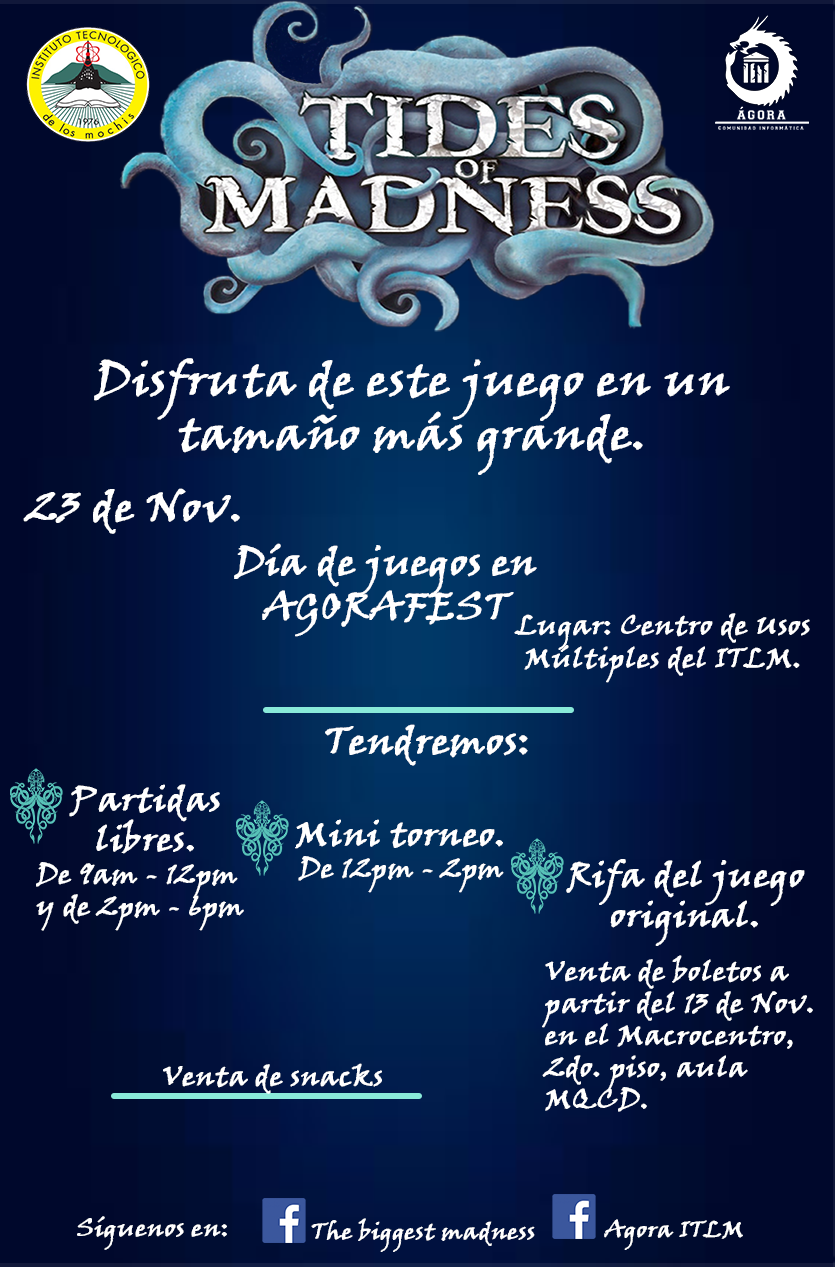
<style>
.page{position:relative;width:835px;height:1267px}
.page>*{position:absolute;margin:0}
.t1{font:44.7px "VinerHandITC";color:#ffffff;font-weight:bold;scale:1.07 1}
.t2{font:41px "VinerHandITC";color:#ffffff;font-weight:bold;scale:1.07 1}
.t3{font:37.2px "VinerHandITC";color:#ffffff;font-weight:bold;scale:1.07 1}
.t4{font:26.8px "VinerHandITC";color:#ffffff;font-weight:bold;scale:1.07 1}
.t5{font:33.5px "VinerHandITC";color:#ffffff;font-weight:bold;scale:1.07 1}
.t6{font:23.8px "VinerHandITC";color:#ffffff;font-weight:bold;scale:1.07 1}
.t7{font:22.3px "VinerHandITC";color:#ffffff;font-weight:bold;scale:1.07 1}
</style>
<div class="page">
<p class="t1" style="left:94px;top:358px;width:636px;height:117px;text-align:center">Disfruta de este juego en un tamaño más grande.</p>
<p class="t2" style="left:23px;top:488px;width:217px;height:46px">23 de Nov.</p>
<p class="t3" style="left:234px;top:543px;width:303px;height:94px;text-align:center">Día de juegos en AGORAFEST</p>
<p class="t4" style="left:514px;top:613px;width:296px;height:70px;text-align:center">Lugar: Centro de Usos Múltiples del ITLM.</p>
<p class="t3" style="left:325px;top:724px;width:203px;height:42px">Tendremos:</p>
<p class="t4" style="left:36px;top:784px;width:208px;height:147px;text-align:center"><span class="t5">Partidas<br>libres.<br></span>De 9am - 12pm y de 2pm - 6pm</p>
<p class="t4" style="left:295px;top:819px;width:209px;height:74px;text-align:center"><span class="t5">Mini torneo.<br></span>De 12pm - 2pm</p>
<p class="t4" style="left:542px;top:859px;width:271px;height:253px;text-align:center"><span class="t5">Rifa del juego original.<br><br></span>Venta de boletos a partir del 13 de Nov. en el Macrocentro, 2do. piso, aula MQCD.</p>
<p class="t4" style="left:163px;top:1063px;width:219px;height:31px">Venta de snacks</p>
<p class="t6" style="left:77px;top:1216px;width:150px;height:34px">Síguenos en:</p>
<p class="t7" style="left:311px;top:1218px;width:224px;height:34px">The biggest madness</p>
<p class="t7" style="left:604px;top:1219px;width:139px;height:31px">Agora ITLM</p>
</div>
